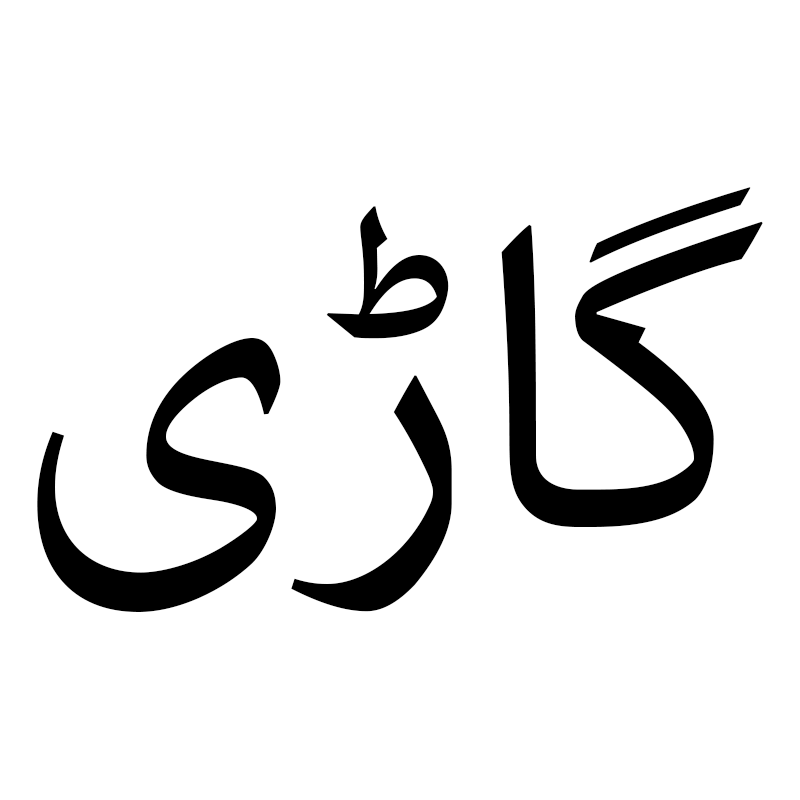
<style>
.page{position:relative;width:800px;height:800px;background:#ffffff}
.page>*{position:absolute;margin:0}
.t1{font:600px "AdobeArabic-Regular";color:#000000}
</style>
<div class="page">
<p class="t1" style="left:37px;top:187px;width:726px;height:425px">گاڑی</p>
</div>
